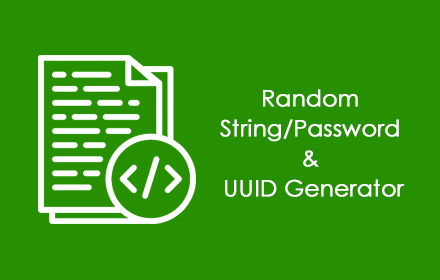
<style>
.page{position:relative;width:440px;height:280px;background:#269001}
.page>*{position:absolute;margin:0}
.t1{font:22.6px/30px "CenturyGothic";color:#ffffff;font-weight:bold}
</style>
<div class="page">
<p class="t1" style="left:220px;top:89px;width:185px;height:108px;text-align:center">Random <br>String/Password <br>&amp; <br>UUID Generator</p>
</div>
